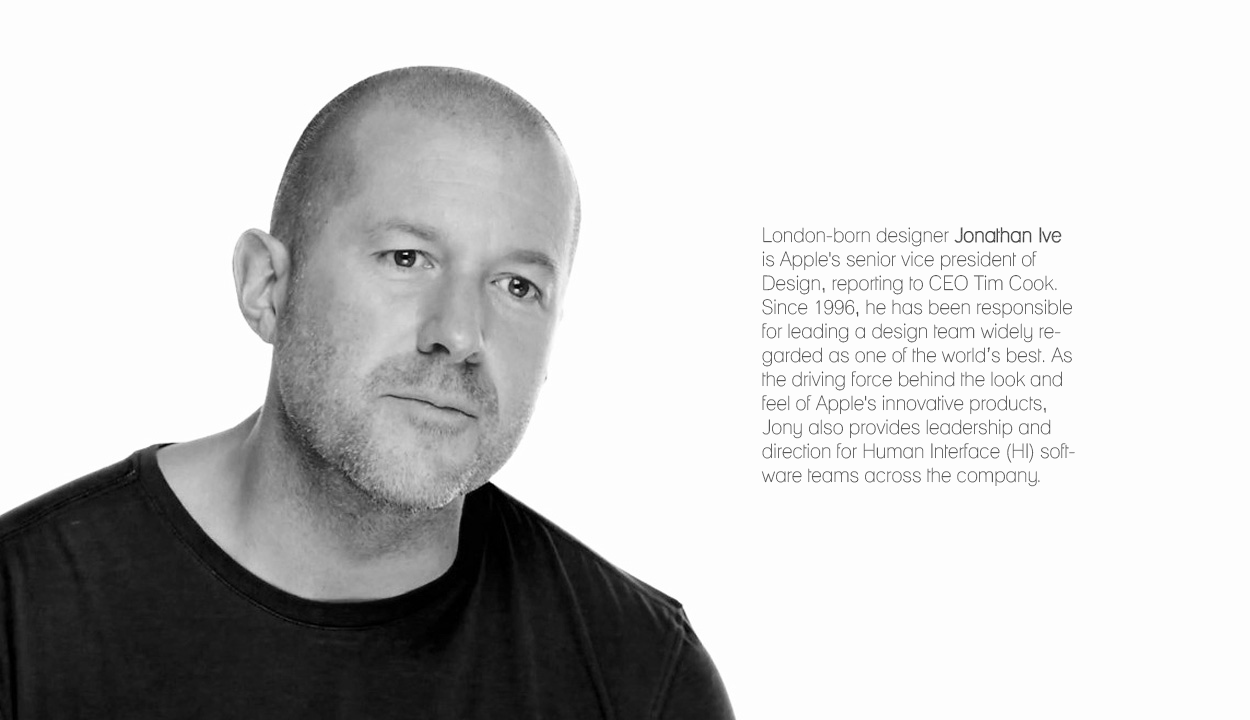
<style>
.page{position:relative;width:1250px;height:720px;background:#fdfdfd}
.page>*{position:absolute;margin:0}
.t1{font:20px "Lane-Narrow";color:#464646}
.t2{font:20px "Lane-Cane";color:#464646}
</style>
<div class="page">
<p class="t1" style="left:761px;top:227px;width:314px;height:260px">London-born designer <span class="t2">Jonathan Ive</span> <br>is Apple's senior vice president of Design, reporting to CEO Tim Cook. Since 1996, he has been responsible for leading a design team widely regarded as one of the world’s best. As the driving force behind the look and feel of Apple's innovative products, Jony also provides leadership and direction for Human Interface (HI) software teams across the company.</p>
</div>
